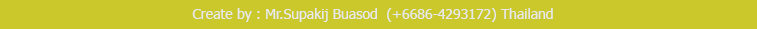
<style>
.page{position:relative;width:757px;height:29px;background:#cac82a}
.page>*{position:absolute;margin:0}
.t1{font:14px "Tahoma";color:#e8eaea}
</style>
<div class="page">
<p class="t1" style="left:192px;top:8px;width:361px;height:14px">Create by : Mr.Supakij Buasod  (+6686-4293172) Thailand</p>
</div>
